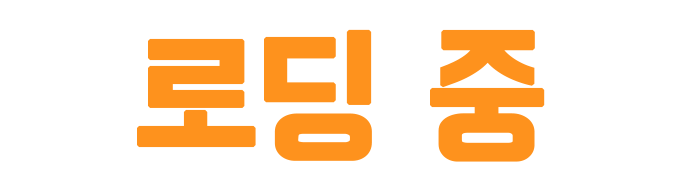
<style>
.page{position:relative;width:680px;height:192px;background:#ffffff}
.page>*{position:absolute;margin:0}
.t1{font:151px "BMHANNA11yrsold";letter-spacing:-0.04em;color:#fe921d;font-weight:bold}
</style>
<div class="page">
<p class="t1" style="left:137px;top:29px;width:408px;height:133px">로딩 중</p>
</div>
